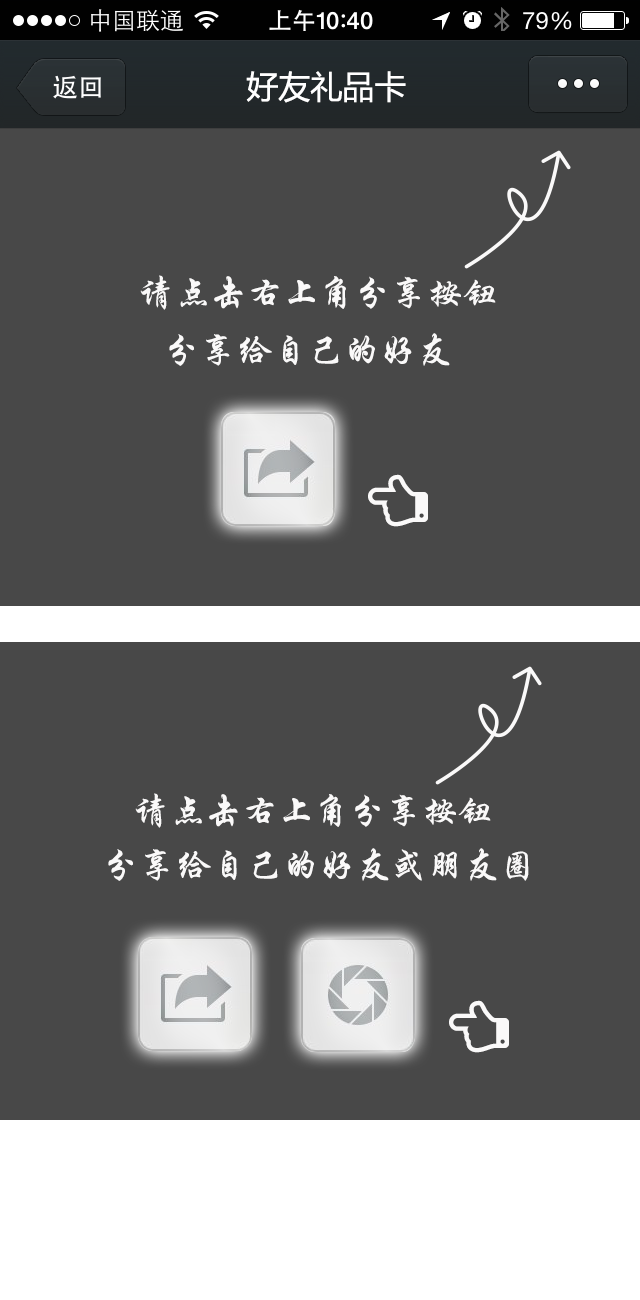
<style>
.page{position:relative;width:640px;height:1300px;background:#484848}
.page>*{position:absolute;margin:0}
.t1{font:32px "MicrosoftYaHei";color:#ffffff}
.t2{font:36px "STXingkai";color:#faf9f9}
</style>
<div class="page">
<p class="t1" style="left:246px;top:71px;width:160px;height:32px">好友礼品卡</p>
<p class="t2" style="left:140px;top:275px;width:356px;height:35px">请点击右上角分享按钮</p>
<p class="t2" style="left:169px;top:333px;width:281px;height:33px">分享给自己的好友</p>
<p class="t2" style="left:135px;top:793px;width:356px;height:35px">请点击右上角分享按钮</p>
<p class="t2" style="left:108px;top:848px;width:421px;height:33px">分享给自己的好友或朋友圈</p>
</div>
